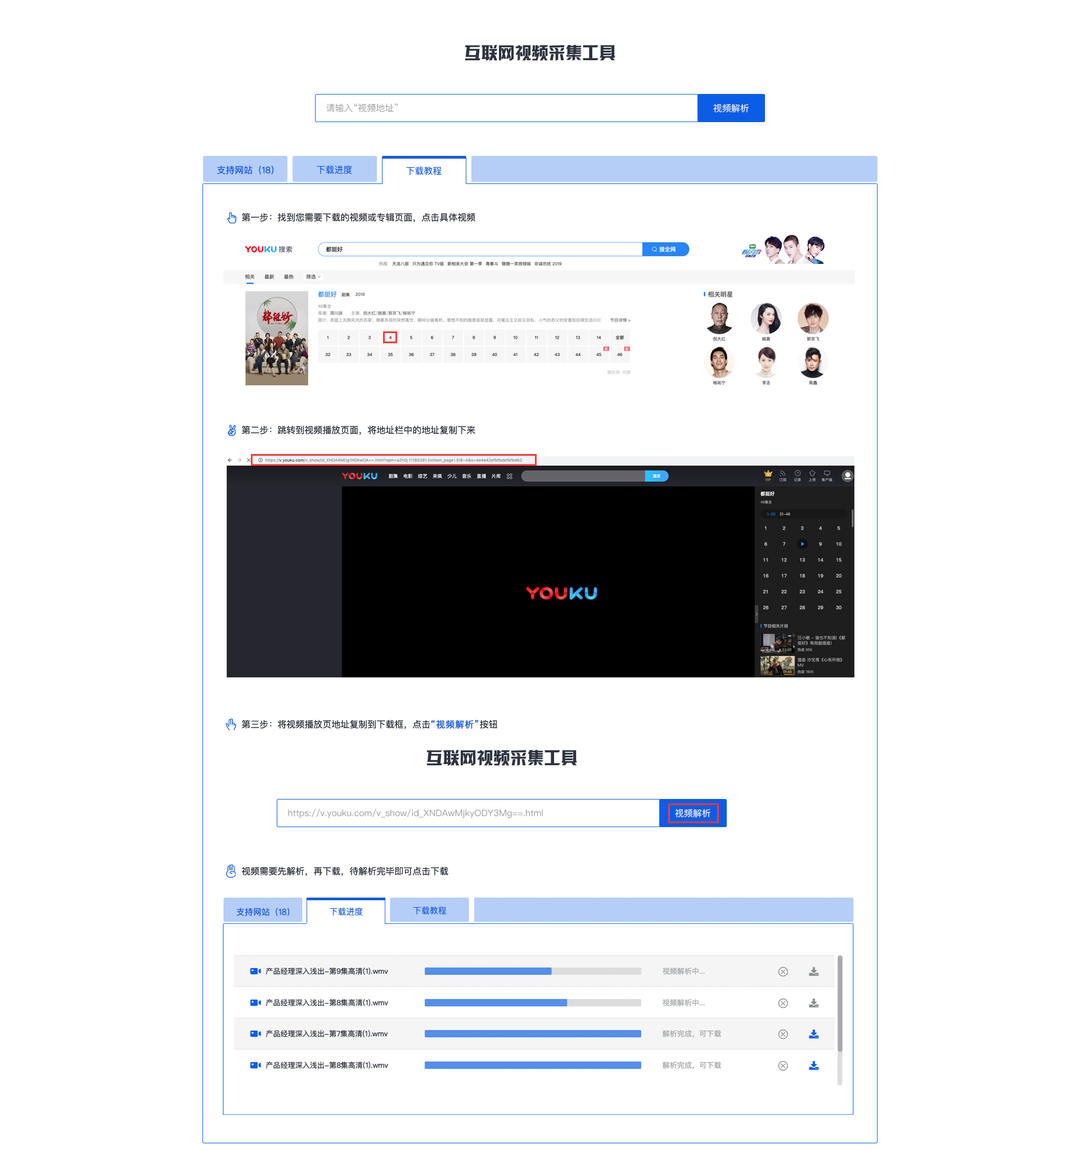
<style>
.page{position:relative;width:1080px;height:1163px;background:#ffffff}
.page>*{position:absolute;margin:0}
.t1{font:16.9px "HYk2gj";color:#2d333f}
.t2{font:9px "PingFangSC-Regular";color:#999999}
.t3{font:9px "PingFangSC-Regular";color:#ffffff}
.t4{font:9px "PingFangSC-Regular";color:#0b5de5}
.t5{font:9px "PingFangSC-Regular";color:#2d333f}
.t6{font:9px "PingFangSC-Regular";color:#0b5de5;font-weight:bold}
</style>
<div class="page">
<p class="t1" style="left:465px;top:44px;width:150px;height:17px">互联网视频采集工具</p>
<p class="t2" style="left:326px;top:104px;width:72px;height:8px">请输入“视频地址”</p>
<p class="t3" style="left:713px;top:104px;width:36px;height:8px">视频解析</p>
<p class="t4" style="left:217px;top:165px;width:57px;height:9px">支持网站（18）</p>
<p class="t4" style="left:317px;top:165px;width:35px;height:9px">下载进度</p>
<p class="t4" style="left:406px;top:166px;width:36px;height:9px">下载教程</p>
<p class="t5" style="left:242px;top:213px;width:233px;height:9px">第一步：找到您需要下载的视频或专辑页面，点击具体视频</p>
<p class="t5" style="left:242px;top:425px;width:233px;height:10px">第二步：跳转到视频播放页面，将地址栏中的地址复制下来</p>
<p class="t5" style="left:242px;top:719px;width:256px;height:10px">第三步：将视频播放页地址复制到下载框，点击<span class="t6">“视频解析”</span>按钮</p>
<p class="t5" style="left:241px;top:866px;width:207px;height:10px">视频需要先解析，再下载，待解析完毕即可点击下载</p>
</div>
